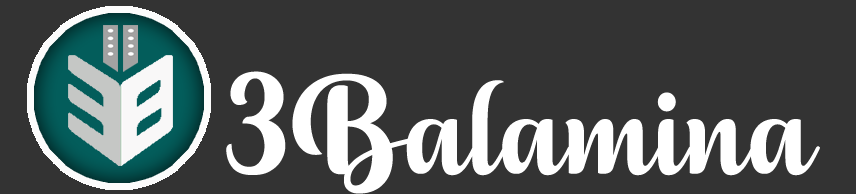
<style>
.page{position:relative;width:856px;height:194px;background:#333333}
.page>*{position:absolute;margin:0}
.t1{font:111px "JulySeventh";color:#ffffff}
.t2{font:148.7px "JulySeventh";color:#ffffff}
.t3{font:145.4px "JulySeventh";color:#ffffff}
</style>
<div class="page">
<p class="t1" style="left:226px;top:71px;width:594px;height:123px"><span class="t2">3</span><span class="t3">B</span>alamina</p>
</div>
